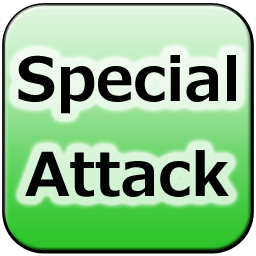
<style>
.page{position:relative;width:256px;height:256px}
.page>*{position:absolute;margin:0}
.t1{font:60px "Meiryo-Bold";color:#000000}
</style>
<div class="page">
<p class="t1" style="left:18px;top:55px;width:218px;height:59px">Special</p>
<p class="t1" style="left:25px;top:150px;width:204px;height:47px">Attack</p>
</div>
